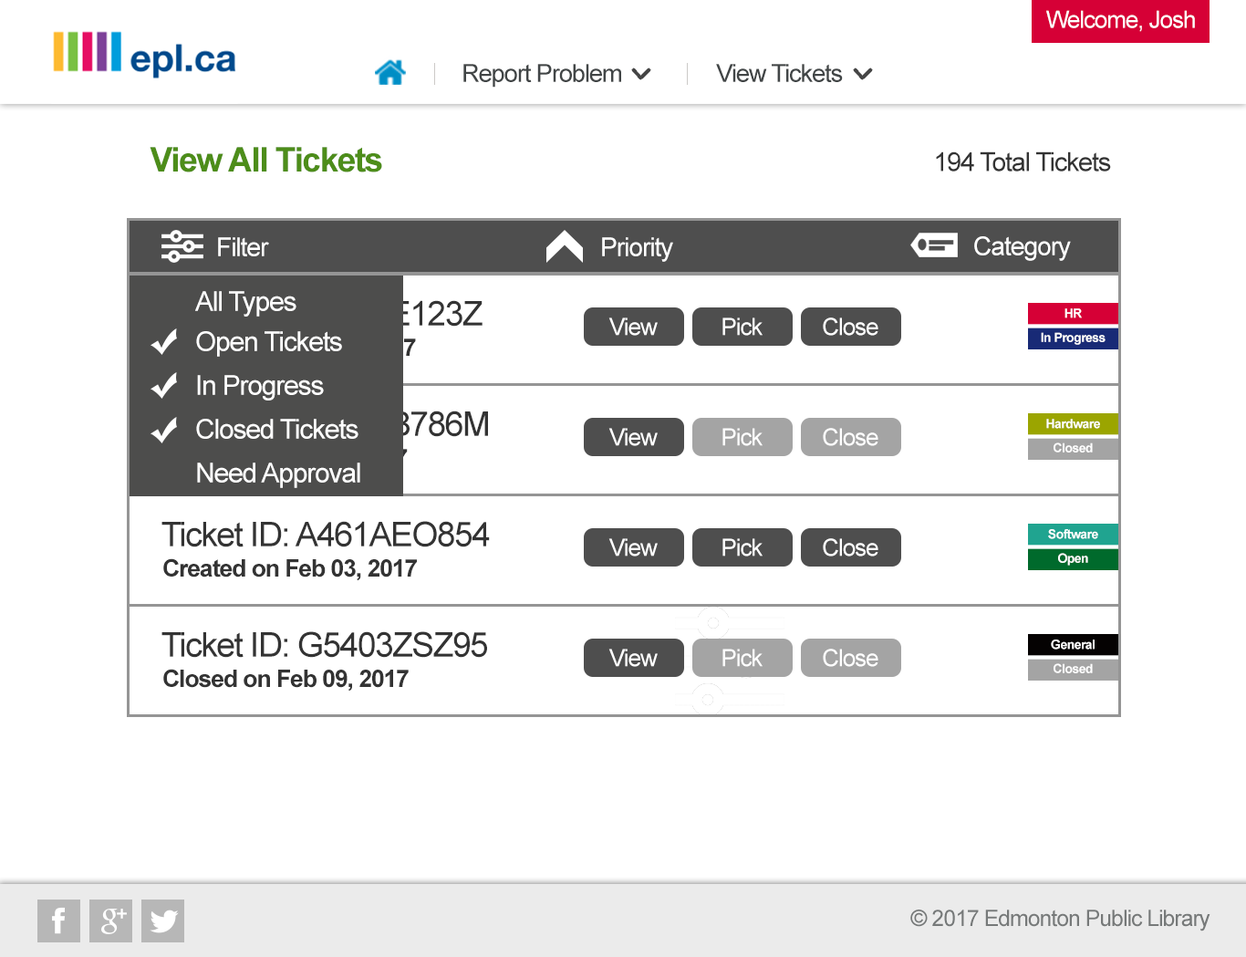
<style>
.page{position:relative;width:1246px;height:957px;background:#ffffff}
.page>*{position:absolute;margin:0}
.t1{font:23.7px "ArialMT";letter-spacing:-0.04em;color:#ffffff}
.t2{font:24.9px "ArialMT";letter-spacing:-0.04em;color:#414546}
.t3{font:33.9px "Arial-BoldMT";letter-spacing:-0.04em;color:#4d8d1a}
.t4{font:26.2px "ArialMT";letter-spacing:-0.04em;color:#333333}
.t5{font:25.9px "ArialMT";letter-spacing:-0.04em;color:#ffffff}
.t6{font:27.4px "ArialMT";letter-spacing:-0.04em;color:#ffffff}
.t7{font:12.8px "Arial-BoldMT";letter-spacing:-0.04em;color:#ffffff}
.t8{font:33.9px "ArialMT";letter-spacing:-0.04em;color:#333333}
.t9{font:24.2px "Arial-BoldMT";letter-spacing:-0.04em;color:#333333}
.t10{font:22.6px "ArialMT";letter-spacing:-0.04em;color:#767979}
</style>
<div class="page">
<p class="t1" style="left:1046px;top:10px;width:149px;height:22px">Welcome, Josh</p>
<p class="t2" style="left:463px;top:64px;width:158px;height:24px">Report Problem</p>
<p class="t2" style="left:716px;top:64px;width:127px;height:18px">View Tickets</p>
<p class="t3" style="left:150px;top:147px;width:232px;height:25px">View All Tickets</p>
<p class="t4" style="left:936px;top:151px;width:175px;height:20px">194 Total Tickets</p>
<p class="t5" style="left:218px;top:237px;width:51px;height:19px">Filter</p>
<p class="t5" style="left:602px;top:237px;width:71px;height:25px">Priority</p>
<p class="t5" style="left:974px;top:236px;width:97px;height:25px">Category</p>
<p class="t6" style="left:195px;top:291px;width:101px;height:26px">All Types</p>
<p class="t1" style="left:608px;top:317px;width:50px;height:19px">View</p>
<p class="t1" style="left:722px;top:317px;width:41px;height:19px">Pick</p>
<p class="t1" style="left:823px;top:317px;width:55px;height:19px">Close</p>
<p class="t7" style="left:1065px;top:308px;width:17px;height:10px">HR</p>
<p class="t6" style="left:196px;top:331px;width:146px;height:26px">Open Tickets</p>
<p class="t7" style="left:1041px;top:332px;width:65px;height:13px">In Progress</p>
<p class="t6" style="left:197px;top:375px;width:127px;height:25px">In Progress</p>
<p class="t6" style="left:196px;top:419px;width:163px;height:20px">Closed Tickets</p>
<p class="t7" style="left:1046px;top:419px;width:54px;height:10px">Hardware</p>
<p class="t1" style="left:608px;top:428px;width:50px;height:18px">View</p>
<p class="t1" style="left:722px;top:428px;width:41px;height:18px">Pick</p>
<p class="t1" style="left:823px;top:428px;width:55px;height:18px">Close</p>
<p class="t7" style="left:1054px;top:442px;width:39px;height:10px">Closed</p>
<p class="t6" style="left:197px;top:463px;width:163px;height:25px">Need Approval</p>
<p class="t8" style="left:161px;top:521px;width:329px;height:26px">Ticket ID: A461AEO854</p>
<p class="t7" style="left:1048px;top:529px;width:50px;height:10px">Software</p>
<p class="t1" style="left:608px;top:538px;width:50px;height:18px">View</p>
<p class="t1" style="left:722px;top:538px;width:41px;height:18px">Pick</p>
<p class="t1" style="left:823px;top:538px;width:55px;height:18px">Close</p>
<p class="t7" style="left:1058px;top:553px;width:30px;height:13px">Open</p>
<p class="t9" style="left:163px;top:558px;width:254px;height:23px">Created on Feb 03, 2017</p>
<p class="t8" style="left:161px;top:631px;width:326px;height:27px">Ticket ID: G5403ZSZ95</p>
<p class="t7" style="left:1051px;top:639px;width:44px;height:11px">General</p>
<p class="t1" style="left:608px;top:649px;width:50px;height:18px">View</p>
<p class="t1" style="left:722px;top:649px;width:41px;height:18px">Pick</p>
<p class="t1" style="left:823px;top:649px;width:55px;height:18px">Close</p>
<p class="t7" style="left:1054px;top:663px;width:39px;height:10px">Closed</p>
<p class="t9" style="left:163px;top:669px;width:246px;height:22px">Closed on Feb 09, 2017</p>
<p class="t10" style="left:910px;top:909px;width:301px;height:22px">© 2017 Edmonton Public Library</p>
</div>
